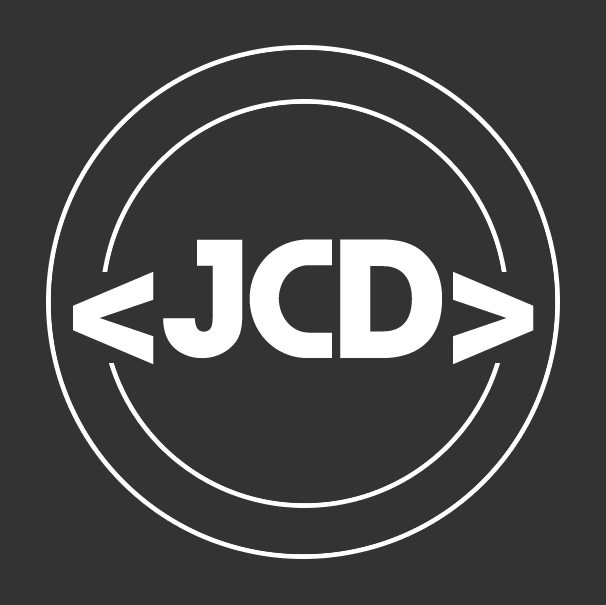
<style>
.page{position:relative;width:606px;height:605px;background:#333333}
.page>*{position:absolute;margin:0}
.t1{font:157.9px "DevilBreezeBold";color:#ffffff}
</style>
<div class="page">
<p class="t1" style="left:73px;top:239px;width:461px;height:125px">&lt;jcd&gt;</p>
</div>
